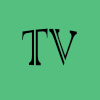
<style>
.page{position:relative;width:100px;height:100px;background:#55bf80}
.page>*{position:absolute;margin:0}
.t1{font:48px "ColonnaMT";color:#000000;font-weight:bold;scale:0.86 1}
</style>
<div class="page">
<p class="t1" style="left:22px;top:28px;width:55px;height:38px">TV</p>
</div>
